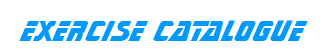
<style>
.page{position:relative;width:321px;height:54px;background:#ffffff}
.page>*{position:absolute;margin:0}
.t1{font:30px "SonicBT-ExtraBold";color:#0099ff}
</style>
<div class="page">
<p class="t1" style="left:19px;top:20px;width:289px;height:21px">Exercise Catalogue</p>
</div>
